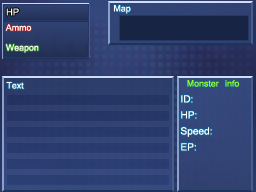
<style>
.page{position:relative;width:256px;height:192px}
.page>*{position:absolute;margin:0}
.t1{font:14px "Kartika";color:#ffffff}
.t2{font:15px "Kartika";color:#ffffff}
.t3{font:16px/16px "Kartika";color:#ffffff}
.t4{font:14px/10px "Kartika";color:#9aff2d}
</style>
<div class="page">
<p class="t1" style="left:114px;top:5px;width:17px;height:9px">Map</p>
<p class="t2" style="left:6px;top:8px;width:13px;height:8px">HP</p>
<p class="t1" style="left:5px;top:24px;width:27px;height:7px">Ammo</p>
<p class="t1" style="left:5px;top:44px;width:34px;height:9px">Weapon</p>
<p class="t1" style="left:6px;top:82px;width:18px;height:7px">Text</p>
<p class="t3" style="left:180px;top:80px;width:59px;height:71px"><span class="t4"> Monster info<br></span>ID:<br>HP:<br>Speed:<br>EP:</p>
</div>
